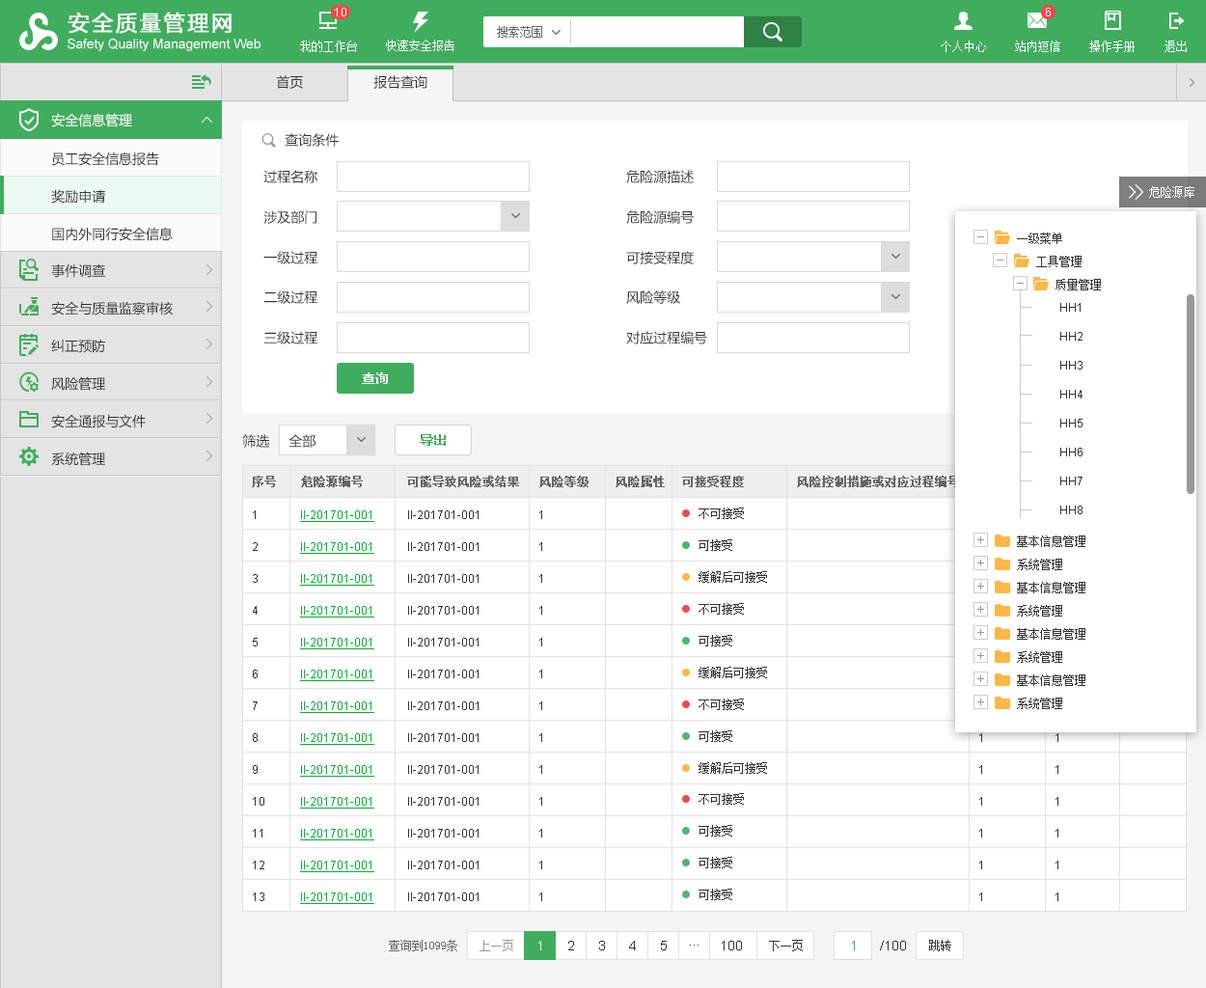
<style>
.page{position:relative;width:1206px;height:988px;background:#ffffff}
.page>*{position:absolute;margin:0}
.t1{font:13.5px "MicrosoftYaHei";color:#333333}
.t2{font:13.5px "MicrosoftYaHei";color:#ffffff}
.t3{font:13.5px/37.6px "MicrosoftYaHei";color:#333333}
.t4{font:11.6px "SimSun";color:#ffffff}
.t5{font:11.6px "SimSun";color:#333333}
.t6{font:11.6px/29px "ArialMT";color:#333333}
.t7{font:13.5px "MicrosoftYaHei-Bold";color:#ffffff}
.t8{font:13.5px "MicrosoftYaHei-Bold";color:#40ad5e}
.t9{font:11.6px "SimSun";color:#666666;font-weight:bold}
.t10{font:11.6px/31.9px "SimSun";color:#333333}
.t11{font:11.6px/31.9px "ArialMT";color:#333333}
.t12{font:11.6px/31.9px "ArialMT";color:#09ac35;text-decoration:underline}
.t13{font:11.6px/31.9px "ArialMT"}
.t14{font:11.6px "SimSun";color:#666666}
.t15{font:11.6px "SimSun";color:#999999}
.t16{font:13.5px "ArialMT";color:#ffffff}
.t17{font:13.5px "ArialMT";color:#333333}
.t18{font:13.5px "ArialMT";color:#40ad5e}
</style>
<div class="page">
<p class="t1" style="left:276px;top:75px;width:27px;height:14px">首页</p>
<p class="t1" style="left:374px;top:75px;width:54px;height:14px">报告查询</p>
<p class="t2" style="left:51px;top:113px;width:81px;height:14px">安全信息管理</p>
<p class="t1" style="left:285px;top:133px;width:54px;height:14px">查询条件</p>
<p class="t3" style="left:51px;top:152px;width:122px;height:89px">员工安全信息报告<br>奖励申请<br>国内外同行安全信息</p>
<p class="t1" style="left:263px;top:170px;width:55px;height:13px">过程名称</p>
<p class="t1" style="left:626px;top:170px;width:68px;height:13px">危险源描述</p>
<p class="t4" style="left:1150px;top:186px;width:45px;height:12px">危险源库</p>
<p class="t1" style="left:263px;top:210px;width:54px;height:14px">涉及部门</p>
<p class="t1" style="left:626px;top:210px;width:68px;height:14px">危险源编号</p>
<p class="t5" style="left:1017px;top:233px;width:46px;height:11px">一级菜单</p>
<p class="t1" style="left:263px;top:251px;width:55px;height:13px">一级过程</p>
<p class="t1" style="left:626px;top:251px;width:68px;height:13px">可接受程度</p>
<p class="t5" style="left:1037px;top:256px;width:45px;height:11px">工具管理</p>
<p class="t3" style="left:51px;top:263px;width:122px;height:203px">事件调查<br>安全与质量监察审核<br>纠正预防<br>风险管理<br>安全通报与文件<br>系统管理</p>
<p class="t5" style="left:1056px;top:279px;width:45px;height:12px">质量管理</p>
<p class="t1" style="left:263px;top:291px;width:55px;height:13px">二级过程</p>
<p class="t1" style="left:626px;top:291px;width:54px;height:13px">风险等级</p>
<p class="t6" style="left:1061px;top:303px;width:22px;height:211px">HH1<br>HH2<br>HH3<br>HH4<br>HH5<br>HH6<br>HH7<br>HH8</p>
<p class="t1" style="left:263px;top:331px;width:55px;height:14px">三级过程</p>
<p class="t1" style="left:626px;top:331px;width:81px;height:14px">对应过程编号</p>
<p class="t7" style="left:362px;top:373px;width:26px;height:11px">查询</p>
<p class="t1" style="left:242px;top:434px;width:27px;height:14px">筛选</p>
<p class="t1" style="left:289px;top:434px;width:27px;height:14px">全部</p>
<p class="t8" style="left:420px;top:434px;width:26px;height:12px">导出</p>
<p class="t9" style="left:252px;top:476px;width:24px;height:11px">序号</p>
<p class="t9" style="left:301px;top:476px;width:62px;height:11px">危险源编号</p>
<p class="t9" style="left:407px;top:476px;width:112px;height:11px">可能导致风险或结果</p>
<p class="t9" style="left:540px;top:476px;width:49px;height:11px">风险等级</p>
<p class="t9" style="left:616px;top:476px;width:49px;height:11px">风险属性</p>
<p class="t9" style="left:682px;top:476px;width:62px;height:11px">可接受程度</p>
<p class="t9" style="left:797px;top:476px;width:162px;height:11px">风险控制措施或对应过程编号</p>
<p class="t10" style="left:699px;top:508px;width:68px;height:75px">不可接受<br>可接受<br>缓解后可接受</p>
<p class="t11" style="left:253px;top:511px;width:11px;height:390px">1<br>2<br>3<br>4<br>5<br>6<br>7<br>8<br>9<br>10<br>11<br>12<br>13</p>
<p class="t12" style="left:300px;top:511px;width:74px;height:202px">II-201701-001<br>II-201701-001<br>II-201701-001<br>II-201701-001<br>II-201701-001<br>II-201701-001<br>II-201701-001</p>
<p class="t11" style="left:408px;top:511px;width:71px;height:199px">II-201701-001<br>II-201701-001<br>II-201701-001<br>II-201701-001<br>II-201701-001<br>II-201701-001<br>II-201701-001</p>
<p class="t11" style="left:540px;top:511px;width:2px;height:390px">1<br>1<br>1<br>1<br>1<br>1<br>1<br>1<br>1<br>1<br>1<br>1<br>1</p>
<p class="t13" style="left:980px;top:511px;width:3px;height:390px">1<br>1<br>1<br>1<br>1<br>1<br>1<br>1<br>1<br>1<br>1<br>1<br>1</p>
<p class="t13" style="left:1056px;top:511px;width:3px;height:390px">1<br>1<br>1<br>1<br>1<br>1<br>1<br>1<br>1<br>1<br>1<br>1<br>1</p>
<p class="t5" style="left:1017px;top:536px;width:69px;height:11px">基本信息管理</p>
<p class="t5" style="left:1017px;top:559px;width:46px;height:11px">系统管理</p>
<p class="t5" style="left:1017px;top:582px;width:69px;height:12px">基本信息管理</p>
<p class="t10" style="left:699px;top:603px;width:68px;height:76px">不可接受<br>可接受<br>缓解后可接受</p>
<p class="t5" style="left:1017px;top:605px;width:46px;height:12px">系统管理</p>
<p class="t5" style="left:1017px;top:628px;width:69px;height:12px">基本信息管理</p>
<p class="t5" style="left:1017px;top:652px;width:46px;height:11px">系统管理</p>
<p class="t5" style="left:1017px;top:675px;width:69px;height:11px">基本信息管理</p>
<p class="t12" style="left:300px;top:702px;width:74px;height:202px">II-201701-001<br>II-201701-001<br>II-201701-001<br>II-201701-001<br>II-201701-001<br>II-201701-001<br>II-201701-001</p>
<p class="t11" style="left:408px;top:702px;width:71px;height:199px">II-201701-001<br>II-201701-001<br>II-201701-001<br>II-201701-001<br>II-201701-001<br>II-201701-001<br>II-201701-001</p>
<p class="t10" style="left:699px;top:699px;width:68px;height:75px">不可接受<br>可接受<br>缓解后可接受</p>
<p class="t5" style="left:1017px;top:698px;width:46px;height:11px">系统管理</p>
<p class="t10" style="left:699px;top:793px;width:45px;height:108px">不可接受<br>可接受<br>可接受<br>可接受</p>
<p class="t14" style="left:389px;top:940px;width:68px;height:12px">查询到1099条</p>
<p class="t15" style="left:480px;top:940px;width:33px;height:12px">上一页</p>
<p class="t16" style="left:539px;top:941px;width:2px;height:10px">1</p>
<p class="t17" style="left:568px;top:941px;width:6px;height:10px">2</p>
<p class="t17" style="left:599px;top:941px;width:6px;height:10px">3</p>
<p class="t17" style="left:629px;top:941px;width:7px;height:10px">4</p>
<p class="t17" style="left:661px;top:941px;width:6px;height:10px">5</p>
<p class="t17" style="left:722px;top:941px;width:20px;height:10px">100</p>
<p class="t5" style="left:769px;top:940px;width:34px;height:12px">下一页</p>
<p class="t18" style="left:852px;top:941px;width:3px;height:10px">1</p>
<p class="t17" style="left:880px;top:941px;width:26px;height:10px">/100</p>
<p class="t5" style="left:929px;top:940px;width:23px;height:12px">跳转</p>
<p class="t17" style="left:690px;top:945px;width:9px;height:1px">...</p>
</div>
